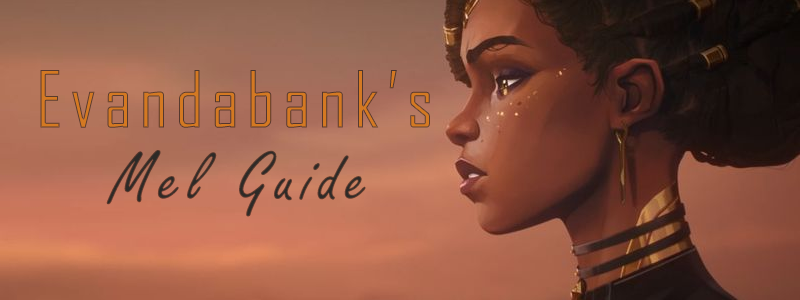
<style>
.page{position:relative;width:800px;height:300px}
.page>*{position:absolute;margin:0}
.t1{font:75px "AgencyFB-Reg";letter-spacing:0.1em}
.t2{font:75px "FreestyleScript-Regular";letter-spacing:0.1em;color:#2d2a27}
</style>
<div class="page">
<p class="t1" style="left:40px;top:70px;width:390px;height:58px">Evandabank’s</p>
<p class="t2" style="left:106px;top:150px;width:260px;height:67px">Mel Guide</p>
</div>
